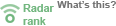
<style>
.page{position:relative;width:116px;height:26px;background:#ffffff}
.page>*{position:absolute;margin:0}
.t1{font:10.8px "Arial-BoldMT";color:#72b67f}
.t2{font:10px "Arial-BoldMT";color:#727272}
</style>
<div class="page">
<p class="t1" style="left:23px;top:4px;width:31px;height:21px">Radar<br>rank</p>
<p class="t2" style="left:57px;top:1px;width:59px;height:7px">What’s this?</p>
</div>
